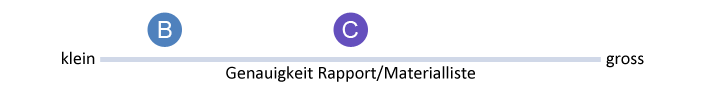
<style>
.page{position:relative;width:717px;height:90px;background:#ffffff}
.page>*{position:absolute;margin:0}
.t1{font:24px "ArialMT";color:#ffffff}
.t2{font:18px "Calibri";color:#000000}
</style>
<div class="page">
<p class="t1" style="left:158px;top:21px;width:14px;height:17px">B</p>
<p class="t1" style="left:342px;top:21px;width:16px;height:17px">C</p>
<p class="t2" style="left:62px;top:51px;width:33px;height:14px">klein</p>
<p class="t2" style="left:226px;top:65px;width:249px;height:17px">Genauigkeit Rapport/Materialliste</p>
<p class="t2" style="left:606px;top:55px;width:38px;height:13px">gross</p>
</div>
